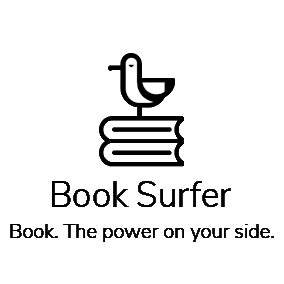
<style>
.page{position:relative;width:284px;height:284px;background:#ffffff}
.page>*{position:absolute;margin:0}
.t1{font:35px "NunitoSans-Light";color:#000000}
.t2{font:20px "NunitoSans-Light";color:#000000}
</style>
<div class="page">
<p class="t1" style="left:52px;top:181px;width:179px;height:26px">Book Surfer</p>
<p class="t2" style="left:10px;top:224px;width:264px;height:18px">Book. The power on your side.</p>
</div>
